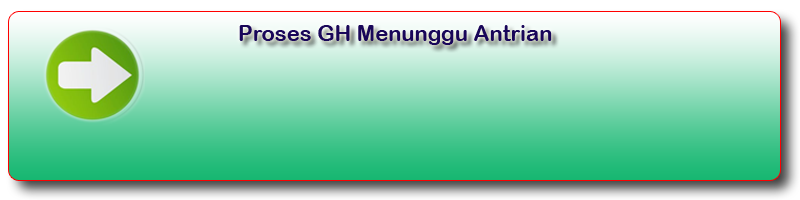
<style>
.page{position:relative;width:800px;height:200px}
.page>*{position:absolute;margin:0}
.t1{font:22px "ArialRoundedMTBold";color:#190659}
</style>
<div class="page">
<p class="t1" style="left:239px;top:25px;width:313px;height:20px">Proses GH Menunggu Antrian</p>
</div>
